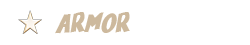
<style>
.page{position:relative;width:250px;height:45px;background:#ffffff}
.page>*{position:absolute;margin:0}
.t1{font:30px "HoustonComicsPersonalUse";color:#cdb99d}
</style>
<div class="page">
<p class="t1" style="left:55px;top:12px;width:75px;height:22px">ARMOR</p>
</div>
